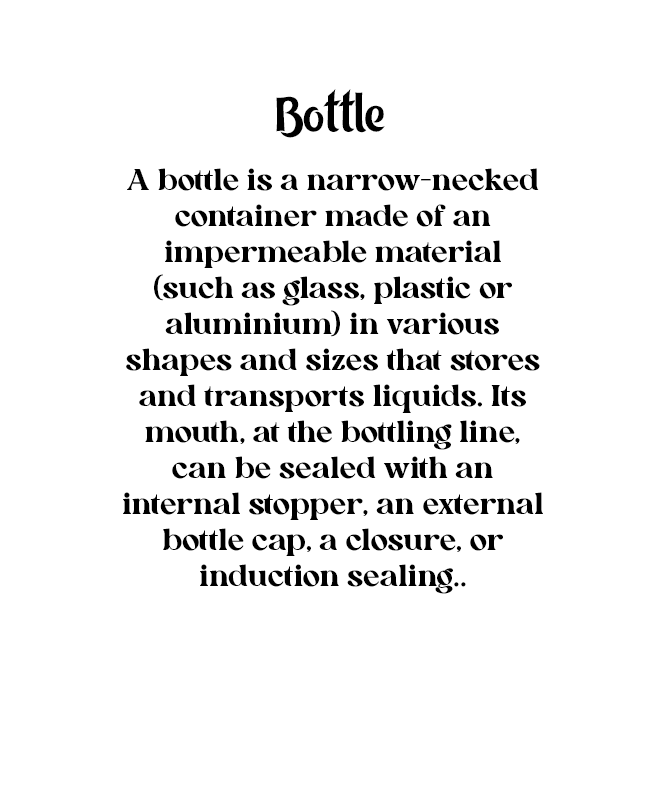
<style>
.page{position:relative;width:654px;height:788px;background:#ffffff}
.page>*{position:absolute;margin:0}
.t1{font:48px "KZ_Tangak-Regular";color:#000000}
.t2{font:30px "AllenoireFreePersonal-Regular";color:#000000}
</style>
<div class="page">
<p class="t1" style="left:276px;top:89px;width:109px;height:49px">Bottle</p>
<p class="t2" style="left:123px;top:168px;width:420px;height:426px;text-align:center">A bottle is a narrow-necked container made of an impermeable material<br>(such as glass, plastic or aluminium) in various shapes and sizes that stores and transports liquids. Its mouth, at the bottling line, can be sealed with an internal stopper, an external bottle cap, a closure, or induction sealing..</p>
</div>
